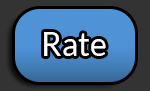
<style>
.page{position:relative;width:150px;height:91px;background:#333333}
.page>*{position:absolute;margin:0}
.t1{font:32px "Lato-Regular";color:#ffffff}
</style>
<div class="page">
<p class="t1" style="left:44px;top:32px;width:62px;height:24px">Rate</p>
</div>
